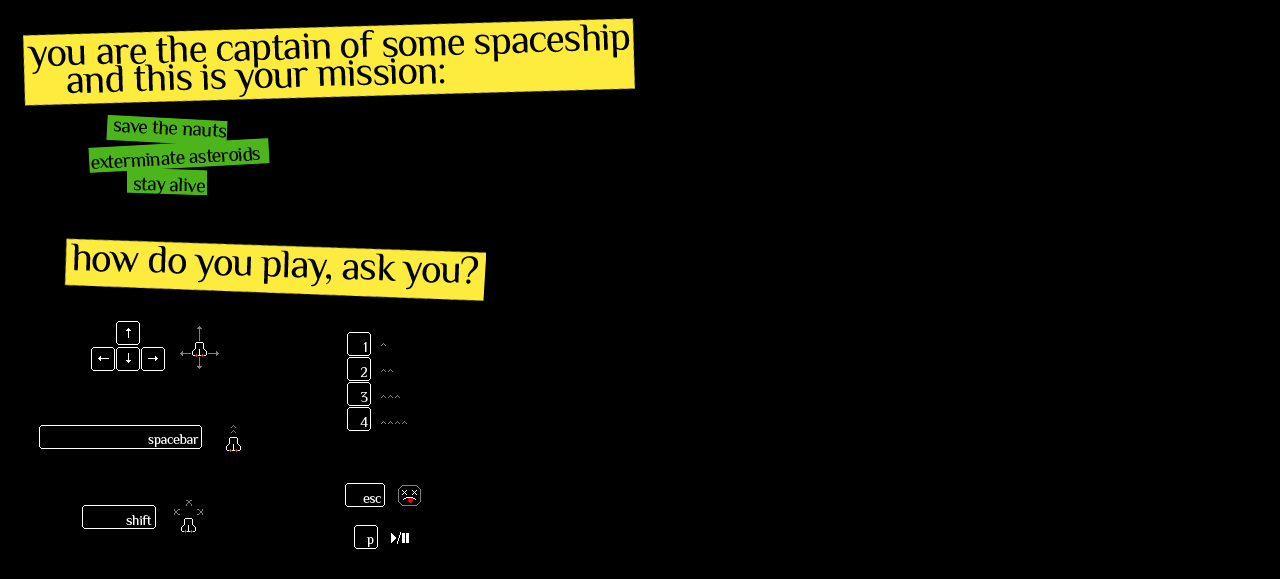
<style>
.page{position:relative;width:1280px;height:579px;background:#000000}
.page>*{position:absolute;margin:0}
.t1{font:40px/28px "Philosopher";letter-spacing:-0.025em;color:#000000}
.t2{font:20px "Philosopher";letter-spacing:-0.025em;color:#000000}
.t3{font:40px "Philosopher";letter-spacing:-0.025em;color:#000000}
.t4{font:14px "Philosopher";letter-spacing:-0.025em;color:#ffffff}
</style>
<div class="page">
<p class="t1" style="left:27px;top:24px;width:603px;height:73px;rotate:-2deg">you are the captain of some spaceship<br> and this is your mission:</p>
<p class="t2" style="left:114px;top:120px;width:112px;height:18px;rotate:3deg">save the nauts</p>
<p class="t2" style="left:91px;top:147px;width:169px;height:22px;rotate:-3deg">exterminate asteroids</p>
<p class="t2" style="left:133px;top:177px;width:72px;height:17px;rotate:2deg">stay alive</p>
<p class="t3" style="left:71px;top:243px;width:407px;height:47px;rotate:2deg">how do you play, ask you?</p>
<p class="t4" style="left:363px;top:342px;width:4px;height:10px">1</p>
<p class="t4" style="left:360px;top:367px;width:7px;height:10px">2</p>
<p class="t4" style="left:360px;top:392px;width:8px;height:10px">3</p>
<p class="t4" style="left:360px;top:417px;width:8px;height:10px">4</p>
<p class="t4" style="left:148px;top:434px;width:51px;height:13px">spacebar</p>
<p class="t4" style="left:363px;top:496px;width:19px;height:7px">esc</p>
<p class="t4" style="left:126px;top:515px;width:26px;height:10px">shift</p>
<p class="t4" style="left:366px;top:537px;width:8px;height:10px">p</p>
</div>
